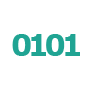
<style>
.page{position:relative;width:90px;height:90px;background:#ffffff}
.page>*{position:absolute;margin:0}
.t1{font:30px "Verdana-Bold";letter-spacing:-0.15em;color:#20a493}
</style>
<div class="page">
<p class="t1" style="left:12px;top:34px;width:68px;height:22px">0101</p>
</div>
